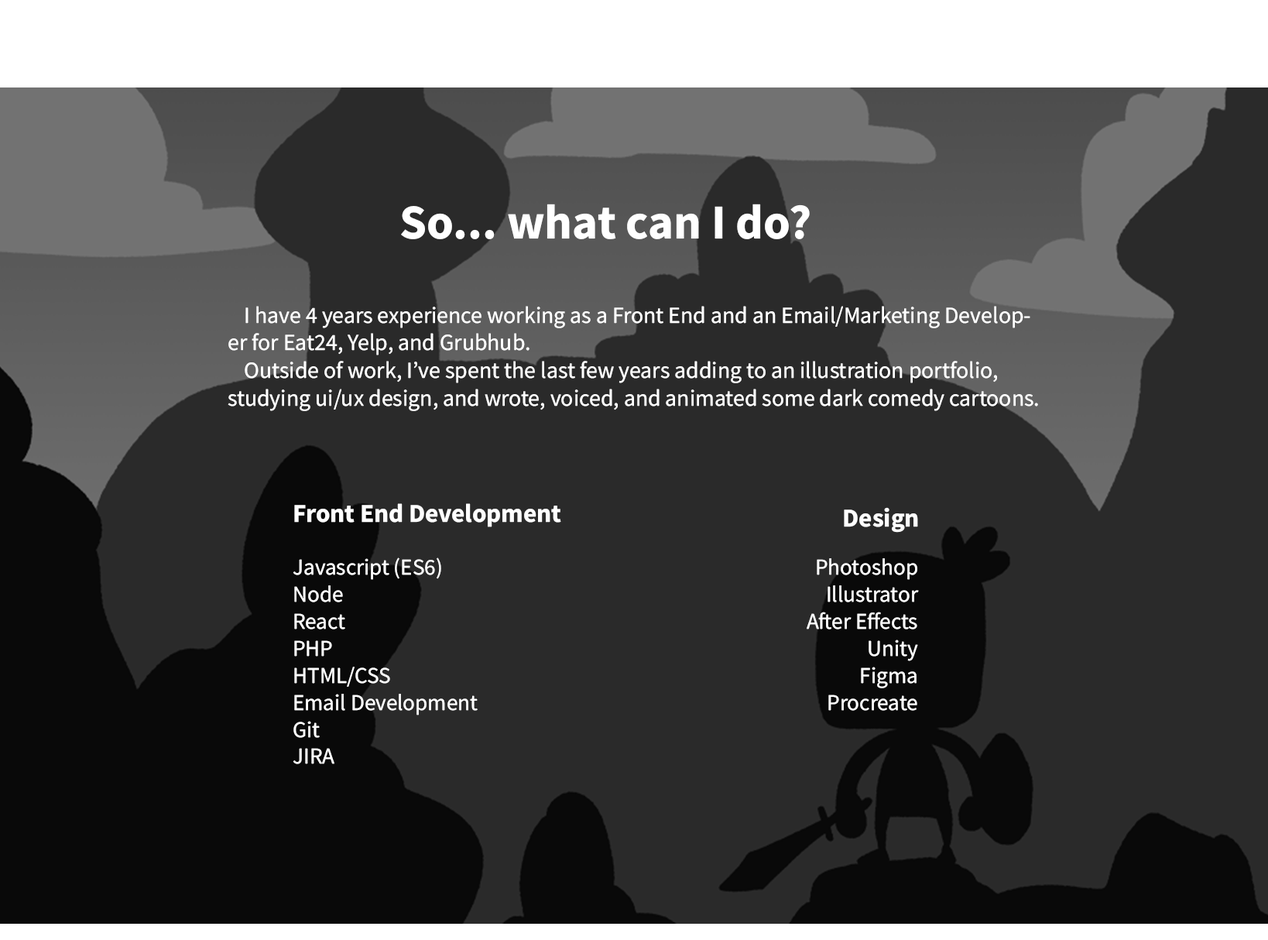
<style>
.page{position:relative;width:1268px;height:940px;background:#2a2a2a}
.page>*{position:absolute;margin:0}
.t1{font:48.7px "SourceSansRoman-Bold";color:#ffffff}
.t2{font:23.1px "SourceSansRoman-Regular";color:#ffffff}
.t3{font:25.8px "SourceSansRoman-Bold";color:#ffffff}
.t4{font:22.5px "SourceSansRoman-Regular";color:#ffffff}
</style>
<div class="page">
<p class="t1" style="left:401px;top:204px;width:409px;height:35px">So... what can I do?</p>
<p class="t2" style="left:228px;top:306px;width:810px;height:105px">I have 4 years experience working as a Front End and an Email/Marketing Developer for Eat24, Yelp, and Grubhub.<br> Outside of work, I’ve spent the last few years adding to an illustration portfolio,  studying ui/ux design, and wrote, voiced, and animated some dark comedy cartoons.</p>
<p class="t3" style="left:294px;top:503px;width:267px;height:24px">Front End Development</p>
<p class="t3" style="left:844px;top:507px;width:74px;height:26px">Design</p>
<p class="t4" style="left:293px;top:558px;width:185px;height:206px">Javascript (ES6)<br>Node<br>React<br>PHP<br>HTML/CSS<br>Email Development<br>Git<br>JIRA</p>
<p class="t4" style="left:807px;top:558px;width:112px;height:153px;text-align:right">Photoshop<br>Illustrator<br>After Effects<br>Unity<br>Figma<br>Procreate</p>
</div>
